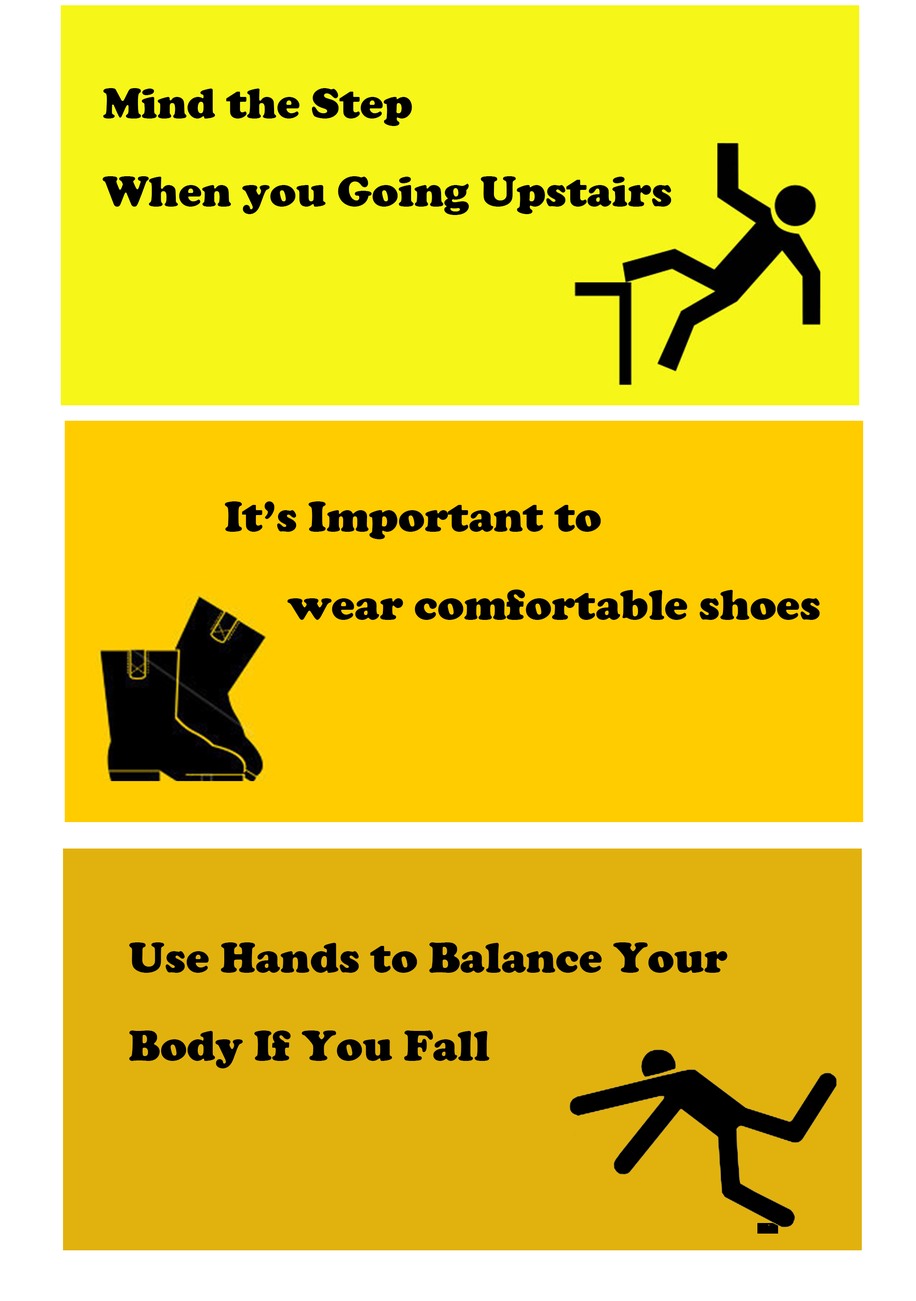
<style>
.page{position:relative;width:916px;height:1301px;background:#f6f618}
.page>*{position:absolute;margin:0}
.t1{font:44.1px/88.1px "CooperBlack";color:#000000}
</style>
<div class="page">
<p class="t1" style="left:103px;top:88px;width:569px;height:127px">Mind the Step <br>When you Going Upstairs</p>
<p class="t1" style="left:225px;top:502px;width:595px;height:118px">It’s Important to <br>    wear comfortable shoes</p>
<p class="t1" style="left:129px;top:943px;width:599px;height:126px">Use Hands to Balance Your <br>Body If You Fall</p>
</div>
